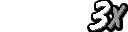
<style>
.page{position:relative;width:128px;height:32px;background:#ffffff}
.page>*{position:absolute;margin:0}
.t1{font:45px "DomDiagonalBT-Regular";letter-spacing:0.075em;color:#ffffff}
.t2{font:29.7px "DomDiagonalBT-Regular";letter-spacing:0.075em;color:#969696}
</style>
<div class="page">
<p class="t1" style="left:89px;top:1px;width:21px;height:29px">3</p>
<p class="t1" style="left:90px;top:2px;width:21px;height:29px">3</p>
<p class="t2" style="left:108px;top:5px;width:17px;height:23px">X</p>
</div>
